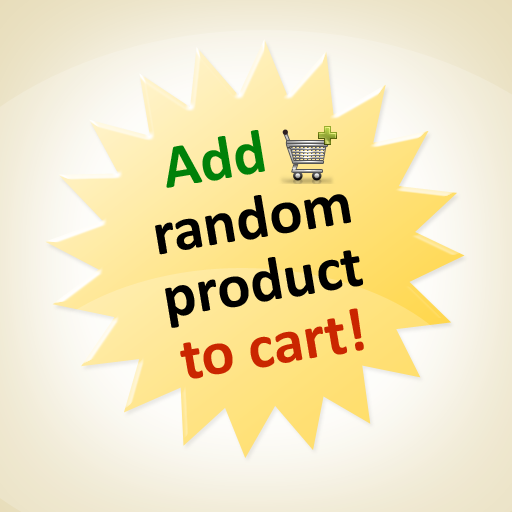
<style>
.page{position:relative;width:512px;height:512px}
.page>*{position:absolute;margin:0}
.t1{font:62px/64.1px "Calibri-Bold";color:#000000}
.t2{font:62px/64.1px "Calibri-Bold";color:#008109}
.t3{font:62px/64.1px "Calibri-Bold";color:#ca2600}
</style>
<div class="page">
<p class="t1" style="left:155px;top:130px;width:209px;height:249px;text-align:center;rotate:-10deg"><span class="t2">Add    <br></span>random<br>product<br><span class="t3">to cart!</span></p>
</div>
